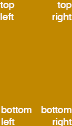
<style>
.page{position:relative;width:72px;height:126px;background:#c18800}
.page>*{position:absolute;margin:0}
.t1{font:10px "Helvetica";color:#ffffff}
</style>
<div class="page">
<p class="t1" style="left:0px;top:2px;width:15px;height:18px">top<br>left</p>
<p class="t1" style="left:52px;top:2px;width:20px;height:20px;text-align:right">top<br>right</p>
<p class="t1" style="left:1px;top:106px;width:31px;height:19px">bottom<br>left</p>
<p class="t1" style="left:41px;top:106px;width:31px;height:21px;text-align:right">bottom<br>right</p>
</div>
